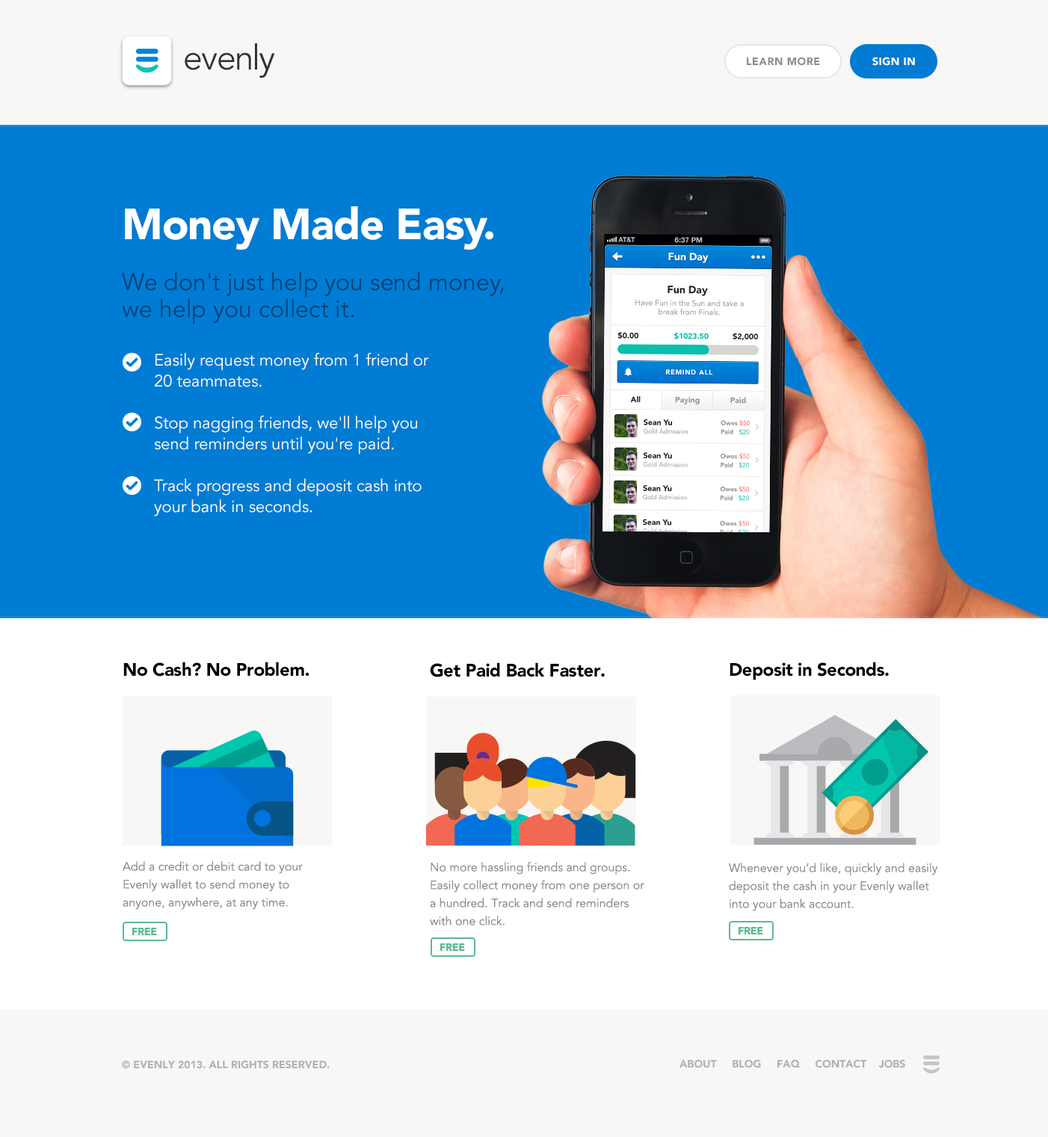
<style>
.page{position:relative;width:1048px;height:1137px;background:#007cd4}
.page>*{position:absolute;margin:0}
.t1{font:34.7px "Avenir-Book";letter-spacing:-0.04em;color:#323232}
.t2{font:10.5px "Avenir-Black";letter-spacing:0.04em;color:#8d8d8d;text-transform:uppercase}
.t3{font:10.5px "Avenir-Black";letter-spacing:0.04em;color:#ffffff;text-transform:uppercase}
.t4{font:43.4px "Avenir-Black";letter-spacing:-0.02em;color:#ffffff}
.t5{font:23.9px/26.9px "Avenir-Book";color:#004174}
.t6{font:16.5px/20.9px "Avenir-Book";color:#ffffff}
.t7{font:17.9px "Avenir-Black";letter-spacing:-0.02em;color:#000000}
.t8{font:12px/17.9px "Avenir-Book";color:#8c8c8c}
.t9{font:10.5px "Avenir-Black";letter-spacing:-0.02em;color:#5bba90;text-transform:uppercase}
.t10{font:10.5px "Avenir-Black";color:#b2b2b0;text-transform:uppercase}
</style>
<div class="page">
<p class="t1" style="left:185px;top:43px;width:90px;height:35px">evenly</p>
<p class="t2" style="left:747px;top:57px;width:73px;height:9px">Learn More</p>
<p class="t3" style="left:873px;top:57px;width:42px;height:9px">Sign in</p>
<p class="t4" style="left:125px;top:206px;width:369px;height:44px">Money Made Easy.</p>
<p class="t5" style="left:122px;top:271px;width:382px;height:54px">We don't just help you send money, <br>we help you collect it.</p>
<p class="t6" style="left:154px;top:353px;width:275px;height:164px">Easily request money from 1 friend or 20 teammates.<br><br>Stop nagging friends, we'll help you send reminders until you're paid.<br><br>Track progress and deposit cash into your bank in seconds.</p>
<p class="t7" style="left:123px;top:662px;width:187px;height:15px">No Cash? No Problem.</p>
<p class="t7" style="left:430px;top:663px;width:175px;height:14px">Get Paid Back Faster.</p>
<p class="t7" style="left:730px;top:662px;width:159px;height:18px">Deposit in Seconds.</p>
<p class="t8" style="left:123px;top:861px;width:180px;height:49px">Add a credit or debit card to your Evenly wallet to send money to anyone, anywhere, at any time.</p>
<p class="t8" style="left:430px;top:862px;width:215px;height:64px">No more hassling friends and groups. Easily collect money from one person or a hundred. Track and send reminders with one click.</p>
<p class="t8" style="left:729px;top:863px;width:209px;height:49px">Whenever you’d like, quickly and easily deposit the cash in your Evenly wallet into your bank account.</p>
<p class="t9" style="left:132px;top:928px;width:25px;height:7px">Free</p>
<p class="t9" style="left:739px;top:927px;width:24px;height:8px">Free</p>
<p class="t9" style="left:440px;top:944px;width:25px;height:7px">Free</p>
<p class="t10" style="left:122px;top:1060px;width:208px;height:9px">© EVENLY 2013. All rights reserved.</p>
<p class="t10" style="left:680px;top:1060px;width:226px;height:9px">ABOUT     Blog     FAQ     Contact    Jobs</p>
</div>
